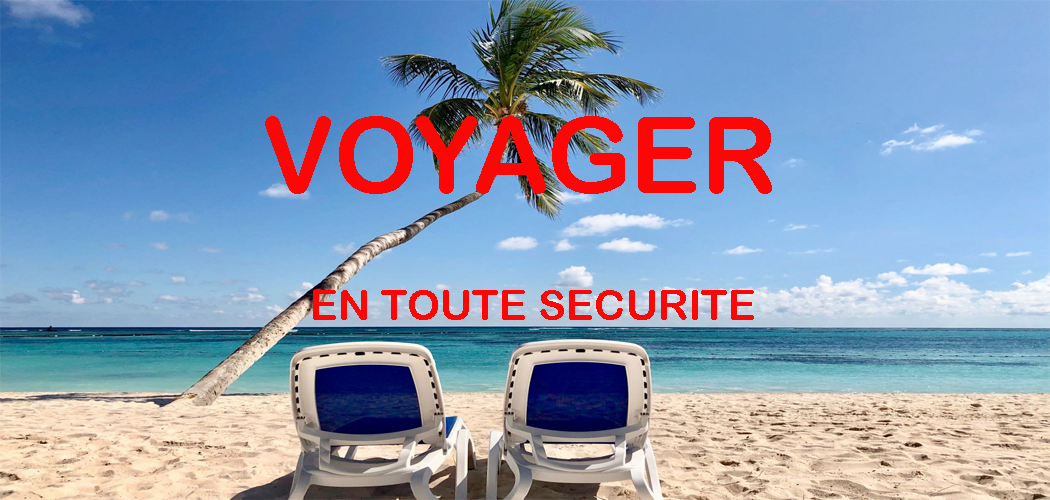
<style>
.page{position:relative;width:1050px;height:500px}
.page>*{position:absolute;margin:0}
.t1{font:42.3px "ArialRoundedMTBold";color:#fc0606}
.t2{font:105.8px "ArialRoundedMTBold";color:#fc0606}
</style>
<div class="page">
<p class="t1" style="left:265px;top:116px;width:507px;height:204px;text-align:center"><span class="t2">VOYAGER <br><br></span>EN TOUTE SECURITE</p>
</div>
